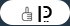
<style>
.page{position:relative;width:70px;height:26px;background:#ffffff}
.page>*{position:absolute;margin:0}
.t1{font:22px "ArialMT";color:#000000}
</style>
<div class="page">
<p class="t1" style="left:38px;top:6px;width:14px;height:16px">ןֵּכ</p>
</div>
